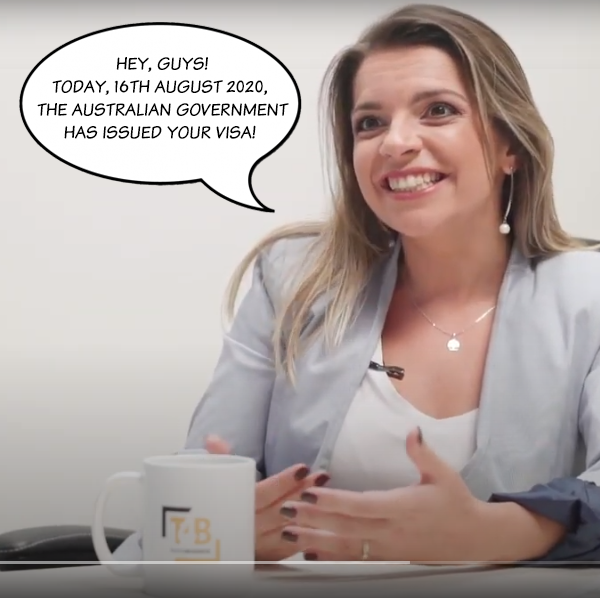
<style>
.page{position:relative;width:600px;height:598px}
.page>*{position:absolute;margin:0}
.t1{font:18.4px/22.9px "KomikaText";color:#000000;text-transform:uppercase}
</style>
<div class="page">
<p class="t1" style="left:37px;top:57px;width:252px;height:82px;text-align:center">HEY, GUYS!<br>TODAY, 16TH AUGUST 2020, <br>THE AUSTRALIAN GOVERNMENT<br>HAS ISSUED YOUR VISA!</p>
</div>
